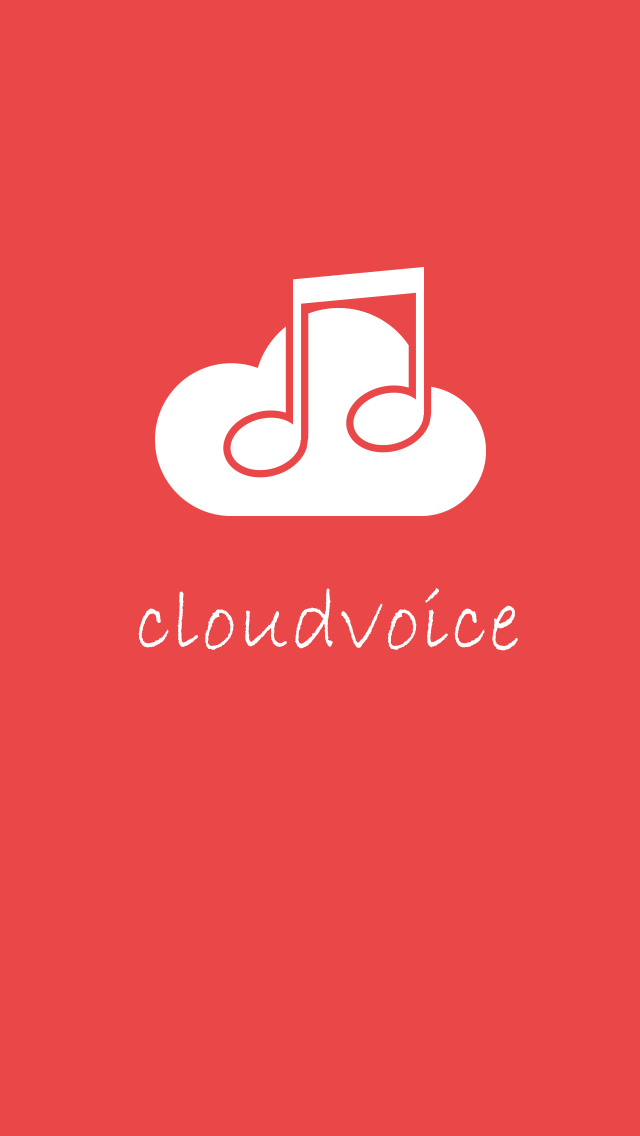
<style>
.page{position:relative;width:640px;height:1136px;background:#ea4848}
.page>*{position:absolute;margin:0}
.t1{font:86.7px "BradleyHandITC";color:#ffffff;font-weight:bold}
</style>
<div class="page">
<p class="t1" style="left:138px;top:588px;width:380px;height:63px">cloudvoice</p>
</div>
